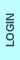
<style>
.page{position:relative;width:20px;height:60px;background:#c0ffff}
.page>*{position:absolute;margin:0}
.t1{font:11px "Arial-BoldMT";color:#2f4f4f}
</style>
<div class="page">
<p class="t1" style="left:5px;top:13px;width:10px;height:34px;rotate:-90deg">LOGIN</p>
</div>
